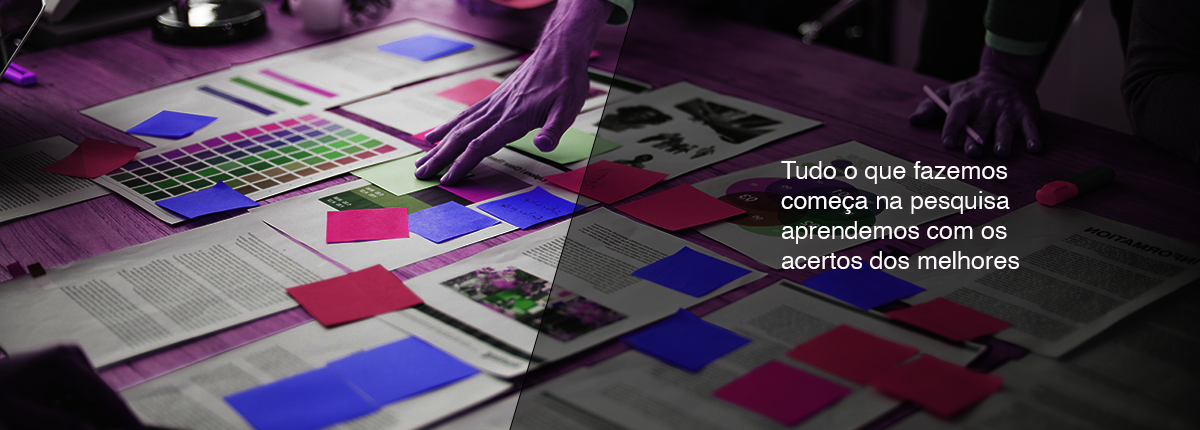
<style>
.page{position:relative;width:1200px;height:430px}
.page>*{position:absolute;margin:0}
.t1{font:25px "Helvetica";color:#fdf9fd}
</style>
<div class="page">
<p class="t1" style="left:781px;top:161px;width:238px;height:108px">Tudo o que fazemos <br>começa na pesquisa<br>aprendemos com os <br>acertos dos melhores</p>
</div>
